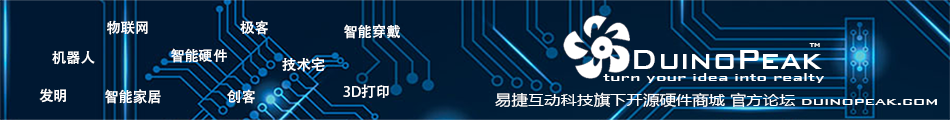
<style>
.page{position:relative;width:950px;height:120px}
.page>*{position:absolute;margin:0}
.t1{font:14.4px "AdobeHeitiStd-Regular";color:#ffffff}
.t2{font:36px "BankGothicBT-Medium";color:#ffffff;scale:0.9 1}
.t3{font:8.3px "BankGothicBT-Medium";color:#ffffff;scale:0.81 1}
.t4{font:10px "AgencyFB-Reg";color:#ffffff;scale:2.81 1}
.t5{font:14.4px "MicrosoftYaHei";color:#ffffff;scale:1.14 1}
.t6{font:15px "BankGothicBT-Medium";color:#ffffff;scale:1.14 1}
</style>
<div class="page">
<p class="t1" style="left:107px;top:20px;width:41px;height:15px">物联网</p>
<p class="t1" style="left:240px;top:20px;width:28px;height:15px">极客</p>
<p class="t1" style="left:344px;top:24px;width:56px;height:15px">智能穿戴</p>
<p class="t1" style="left:52px;top:51px;width:43px;height:14px">机器人</p>
<p class="t1" style="left:171px;top:48px;width:56px;height:15px">智能硬件</p>
<p class="t2" style="left:634px;top:50px;width:188px;height:19px">DuinoPeak</p>
<p class="t3" style="left:809px;top:43px;width:11px;height:4px">TM</p>
<p class="t1" style="left:282px;top:57px;width:43px;height:15px">技术宅</p>
<p class="t4" style="left:603px;top:73px;width:221px;height:10px">turn your idea into realty</p>
<p class="t1" style="left:39px;top:88px;width:27px;height:15px">发明</p>
<p class="t1" style="left:105px;top:89px;width:56px;height:15px">智能家居</p>
<p class="t1" style="left:227px;top:89px;width:28px;height:15px">创客</p>
<p class="t1" style="left:343px;top:84px;width:46px;height:14px">3D打印</p>
<p class="t5" style="left:495px;top:92px;width:442px;height:16px">易捷互动科技旗下开源硬件商城 官方论坛 <span class="t6">duinopeak.com</span></p>
</div>
